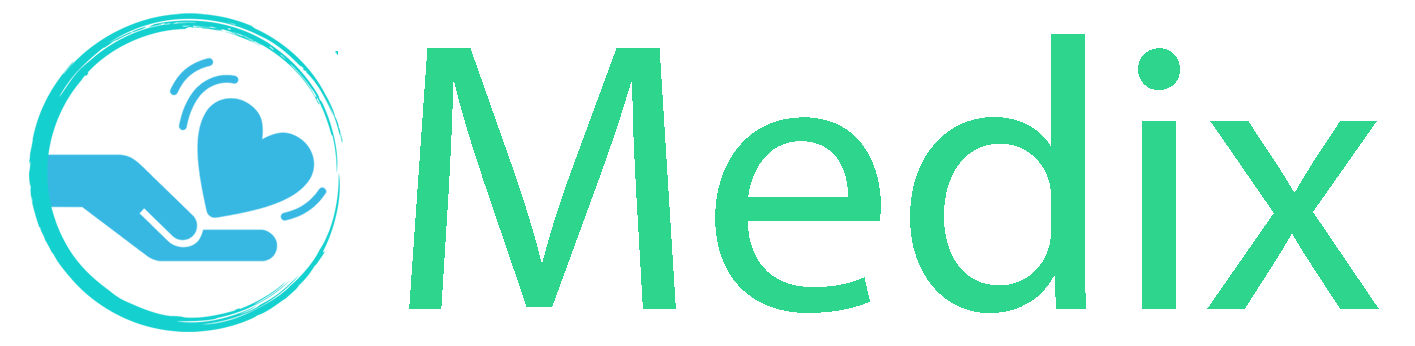
<style>
.page{position:relative;width:1415px;height:346px;background:#ffffff}
.page>*{position:absolute;margin:0}
.t1{font:387.5px "MyriadPro-Regular";color:#2ed58d}
</style>
<div class="page">
<p class="t1" style="left:409px;top:34px;width:970px;height:279px">Medix</p>
</div>
